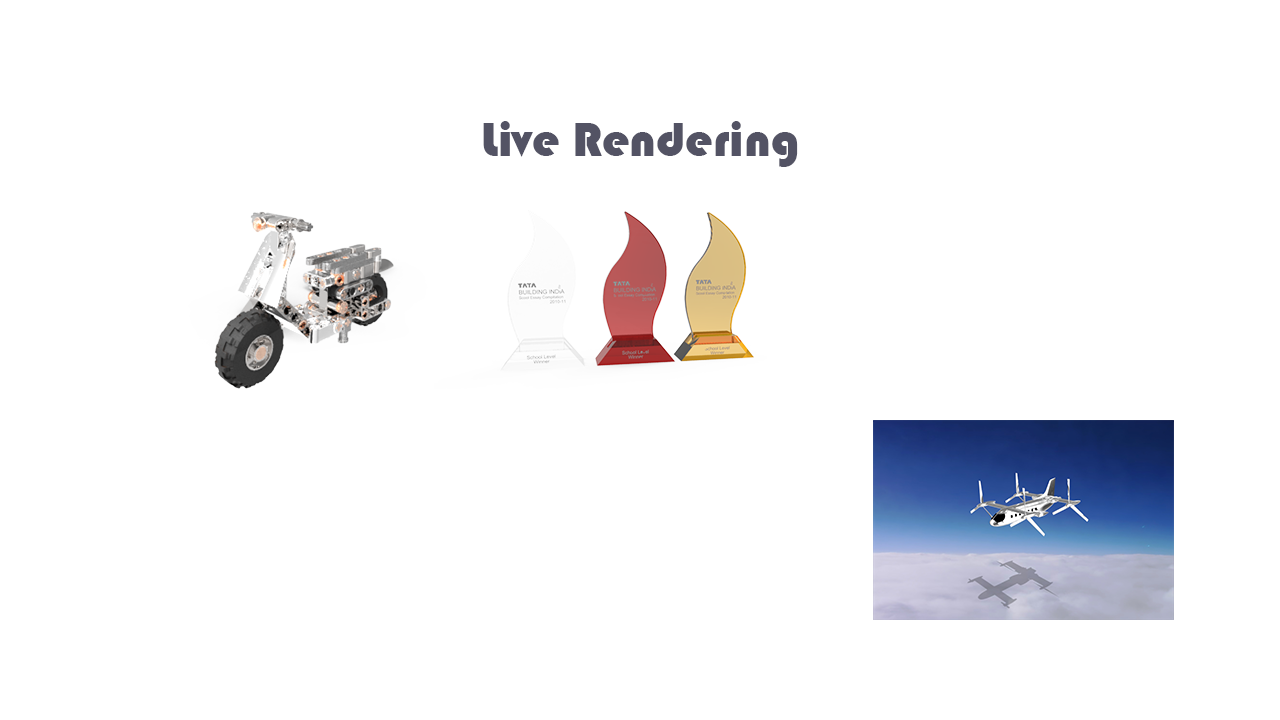
<style>
.page{position:relative;width:1280px;height:720px;background:#ffffff}
.page>*{position:absolute;margin:0}
.t1{font:12px "Bauhaus93";color:#535364}
</style>
<div class="page">
<p class="t1" style="left:483px;top:121px;width:315px;height:46px">Live Rendering</p>
</div>
